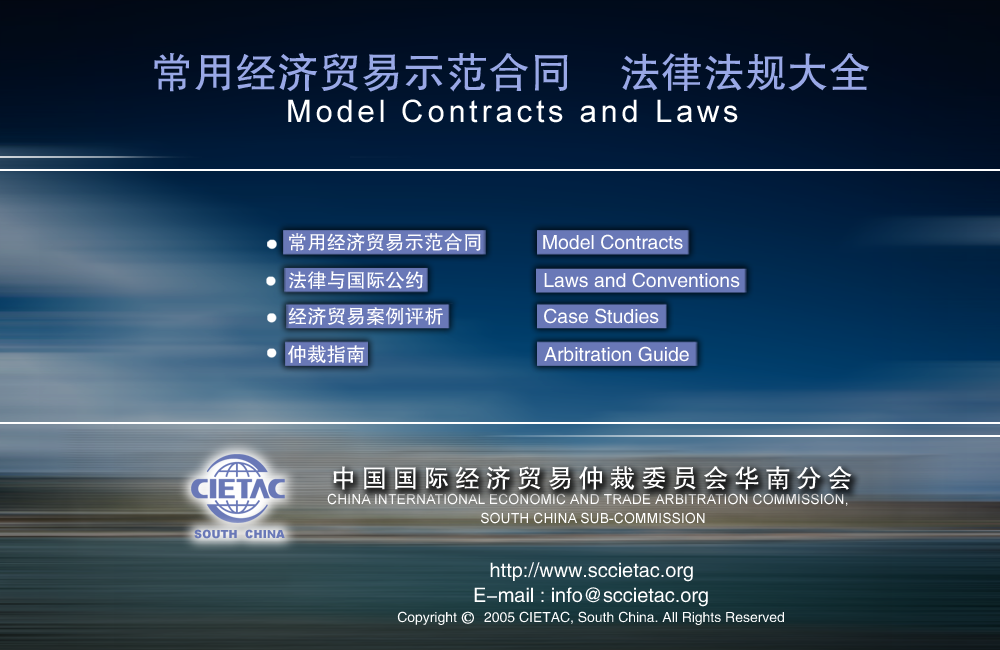
<style>
.page{position:relative;width:1000px;height:650px}
.page>*{position:absolute;margin:0}
.t1{font:42.1px "FZHTJW--GB1-0";color:#99a8e6}
.t2{font:31px "ArialMT";letter-spacing:0.12em;color:#ffffff}
.t3{font:19.5px "FZHTJW--GB1-0";color:#ffffff}
.t4{font:25.9px "FZHTJW--GB1-0";letter-spacing:0.2em;color:#ffffff}
.t5{font:13.7px/19.1px "ArialMT";color:#ffffff;text-transform:uppercase}
.t6{font:11px "Arial-Black";color:#6978b7}
.t7{font:19.9px "FZHTJW--GB1-0";color:#ffffff}
.t8{font:14px/24px "FZHTJW--GB1-0";color:#ffffff}
.t9{font:19.9px/24px "FZHTJW--GB1-0";color:#ffffff}
.t10{font:12px "FZSY--SURROGATE-0";color:#ffffff;font-weight:bold}
</style>
<div class="page">
<p class="t1" style="left:154px;top:53px;width:716px;height:39px">常用经济贸易示范合同    法律法规大全</p>
<p class="t2" style="left:288px;top:99px;width:450px;height:24px">Model Contracts and Laws</p>
<p class="t3" style="left:289px;top:233px;width:394px;height:18px">常用经济贸易示范合同           Model Contracts</p>
<p class="t3" style="left:288px;top:271px;width:452px;height:18px">法律与国际公约                      Laws and Conventions</p>
<p class="t3" style="left:288px;top:307px;width:371px;height:18px">经济贸易案例评析                  Case Studies</p>
<p class="t3" style="left:288px;top:345px;width:401px;height:18px">仲裁指南                                 Arbitration Guide</p>
<p class="t4" style="left:333px;top:466px;width:519px;height:24px">中国国际经济贸易仲裁委员会华南分会</p>
<p class="t5" style="left:327px;top:493px;width:521px;height:31px;text-align:center">CHINA INTERNATIONAL ECONOMIC AND TRADE ARBITRATION COMMISSION, <br> South China Sub-Commission</p>
<p class="t6" style="left:194px;top:529px;width:91px;height:10px">SOUTH  CHINA</p>
<p class="t7" style="left:490px;top:562px;width:203px;height:20px">http://www.sccietac.org</p>
<p class="t8" style="left:397px;top:587px;width:387px;height:38px;text-align:center"><span class="t9">E-mail : info@sccietac.org<br></span>Copyright       2005 CIETAC, South China. All Rights Reserved</p>
<p class="t10" style="left:461px;top:611px;width:13px;height:13px">©</p>
</div>
